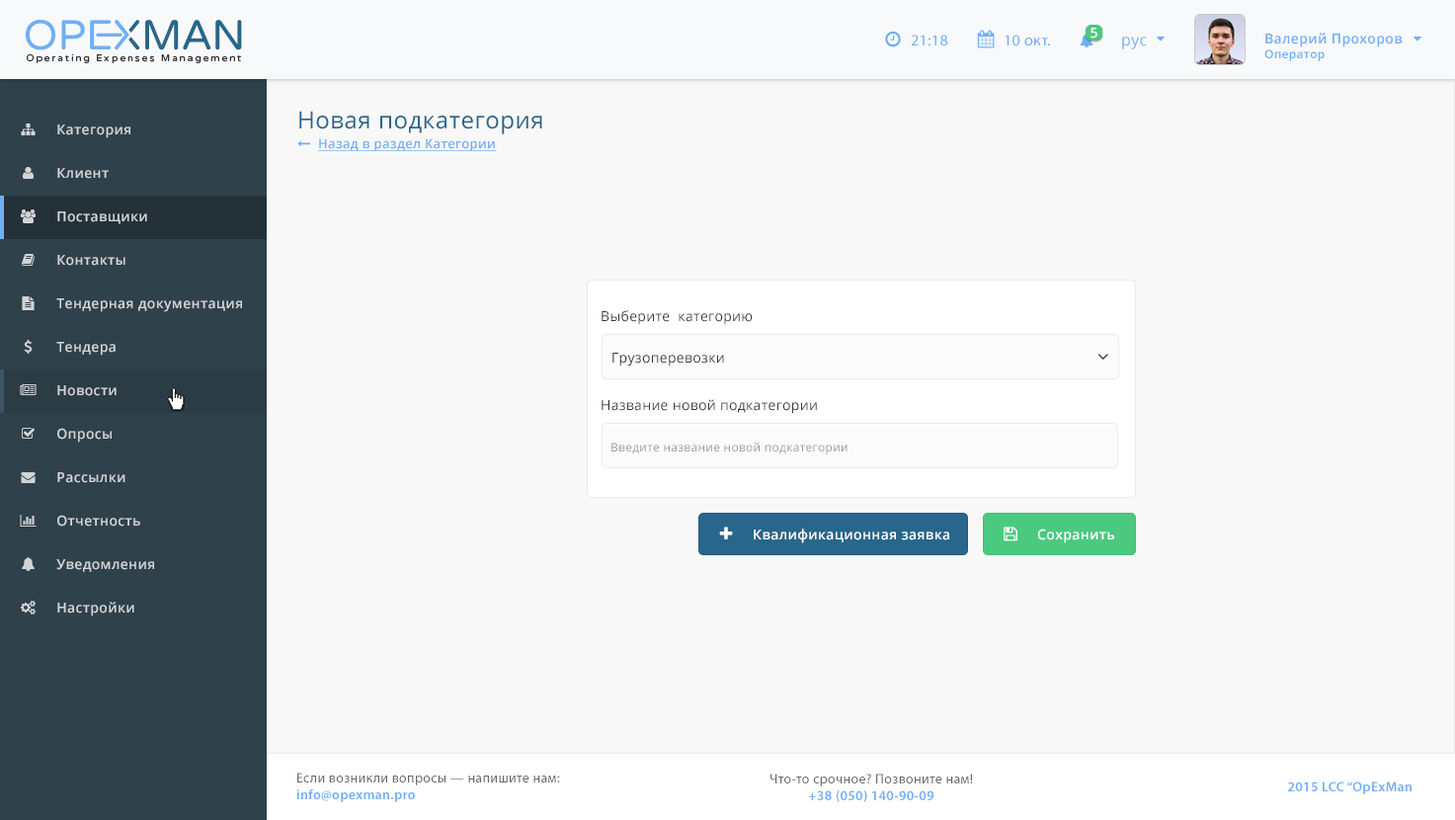
<style>
.page{position:relative;width:1455px;height:820px;background:#f8f8f8}
.page>*{position:absolute;margin:0}
.t1{font:13.8px "OpenSans-Semibold";letter-spacing:0.025em;color:#ffffff}
.t2{font:15.7px "MyriadPro-Regular";letter-spacing:0.025em;color:#6faff8}
.t3{font:15.7px "OpenSans";letter-spacing:0.025em;color:#6eaff8}
.t4{font:13.8px "OpenSans-Semibold";letter-spacing:0.025em;color:#6eaef7}
.t5{font:11.8px "OpenSans-Semibold";letter-spacing:0.025em;color:#6eaef7}
.t6{font:23.6px "OpenSans";letter-spacing:0.025em;color:#29658b}
.t7{font:13.8px "OpenSans-Semibold";letter-spacing:0.025em;color:#d2d5d7}
.t8{font:12.8px "OpenSans-Semibold";letter-spacing:0.025em;color:#6faff8;text-decoration:underline}
.t9{font:13.8px "OpenSans";letter-spacing:0.025em;color:#373838}
.t10{font:13.8px "OpenSans";letter-spacing:0.025em;color:#333333}
.t11{font:11.8px "OpenSans";letter-spacing:0.025em;color:#999999}
.t12{font:13.8px "MyriadPro-Regular";letter-spacing:0.025em;color:#696969}
.t13{font:13.8px "MyriadPro-Semibold";letter-spacing:0.025em;color:#6eaef8}
</style>
<div class="page">
<p class="t1" style="left:1090px;top:28px;width:7px;height:11px">5</p>
<p class="t2" style="left:911px;top:35px;width:37px;height:11px">21:18</p>
<p class="t2" style="left:1004px;top:35px;width:46px;height:11px">10 окт.</p>
<p class="t3" style="left:1122px;top:37px;width:25px;height:12px">рус</p>
<p class="t4" style="left:1264px;top:33px;width:138px;height:28px">Валерий Прохоров<br><span class="t5">Оператор</span></p>
<p class="t6" style="left:299px;top:111px;width:243px;height:23px">Новая подкатегория</p>
<p class="t7" style="left:57px;top:124px;width:73px;height:14px">Категория</p>
<p class="t8" style="left:318px;top:138px;width:179px;height:13px">Назад в раздел Категории</p>
<p class="t7" style="left:57px;top:168px;width:52px;height:11px">Клиент</p>
<p class="t7" style="left:57px;top:211px;width:90px;height:13px">Поставщики</p>
<p class="t7" style="left:57px;top:255px;width:68px;height:11px">Контакты</p>
<p class="t7" style="left:56px;top:298px;width:186px;height:14px">Тендерная документация</p>
<p class="t9" style="left:601px;top:310px;width:152px;height:15px">Выберите  категорию</p>
<p class="t7" style="left:56px;top:342px;width:60px;height:14px">Тендера</p>
<p class="t10" style="left:612px;top:353px;width:112px;height:13px">Грузоперевозки</p>
<p class="t7" style="left:57px;top:385px;width:60px;height:11px">Новости</p>
<p class="t9" style="left:601px;top:399px;width:216px;height:15px">Название новой подкатегории</p>
<p class="t7" style="left:57px;top:428px;width:55px;height:14px">Опросы</p>
<p class="t11" style="left:611px;top:442px;width:236px;height:12px">Введите название новой подкатегории</p>
<p class="t7" style="left:57px;top:472px;width:68px;height:11px">Рассылки</p>
<p class="t7" style="left:57px;top:515px;width:83px;height:11px">Отчетность</p>
<p class="t1" style="left:754px;top:528px;width:195px;height:15px">Квалификационная заявка</p>
<p class="t1" style="left:1037px;top:528px;width:77px;height:15px">Сохранить</p>
<p class="t7" style="left:56px;top:559px;width:98px;height:13px">Уведомления</p>
<p class="t7" style="left:57px;top:601px;width:77px;height:15px">Настройки</p>
<p class="t12" style="left:296px;top:772px;width:264px;height:30px">Если возникли вопросы — напишите нам:<br><span class="t13">info@opexman.pro</span></p>
<p class="t12" style="left:770px;top:773px;width:203px;height:29px;text-align:center">Что-то срочное? Позвоните нам!<br><span class="t13">+38 (050) 140-90-09</span></p>
<p class="t13" style="left:1288px;top:781px;width:123px;height:13px">2015 LCC “OpExMan</p>
</div>
